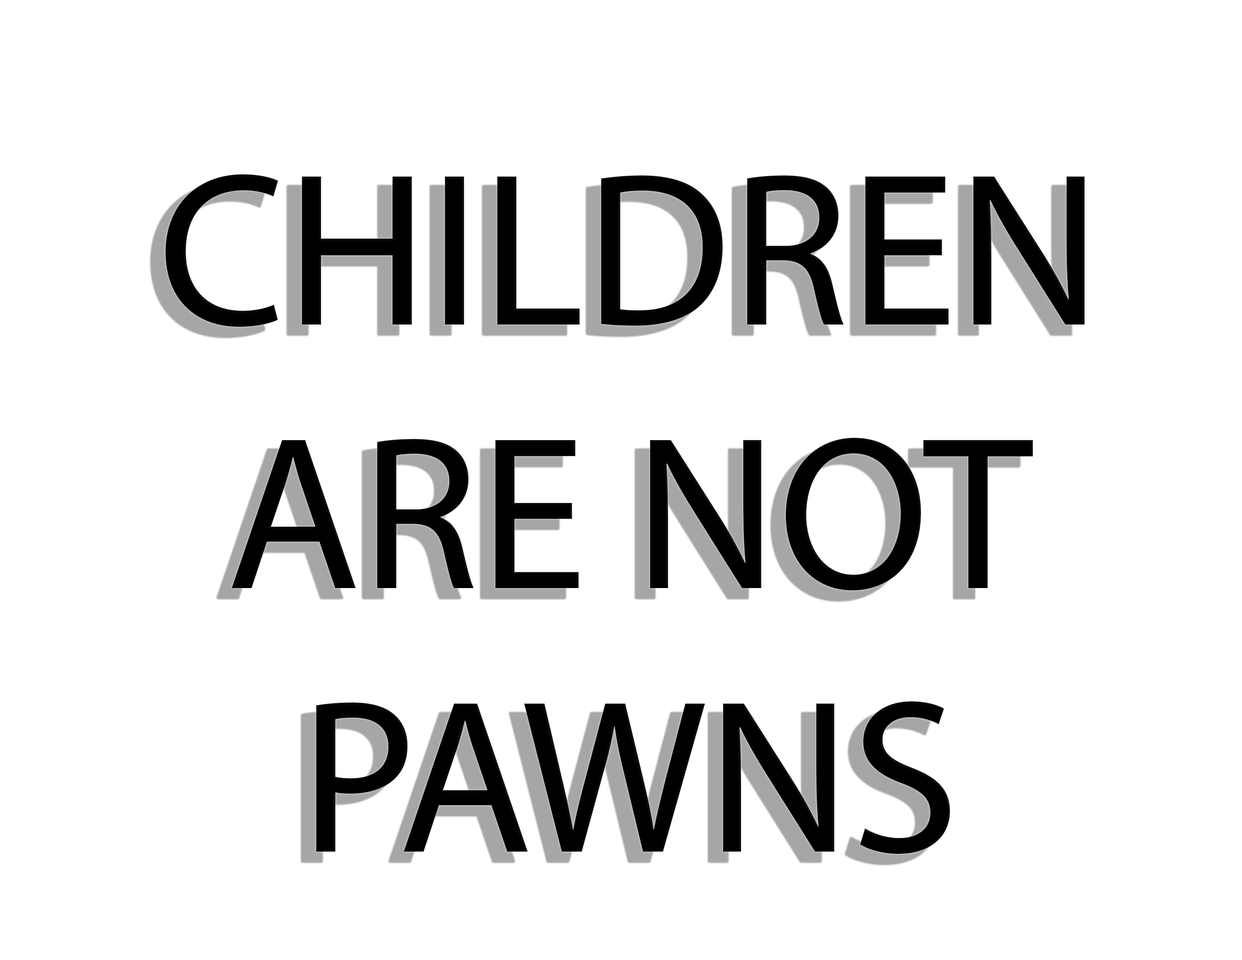
<style>
.page{position:relative;width:1242px;height:960px;background:#ffffff}
.page>*{position:absolute;margin:0}
.t1{font:219.6px "MyriadPro-Regular";color:#000000}
</style>
<div class="page">
<p class="t1" style="left:166px;top:174px;width:919px;height:680px;text-align:center">CHILDREN<br>ARE NOT<br>PAWNS</p>
</div>
